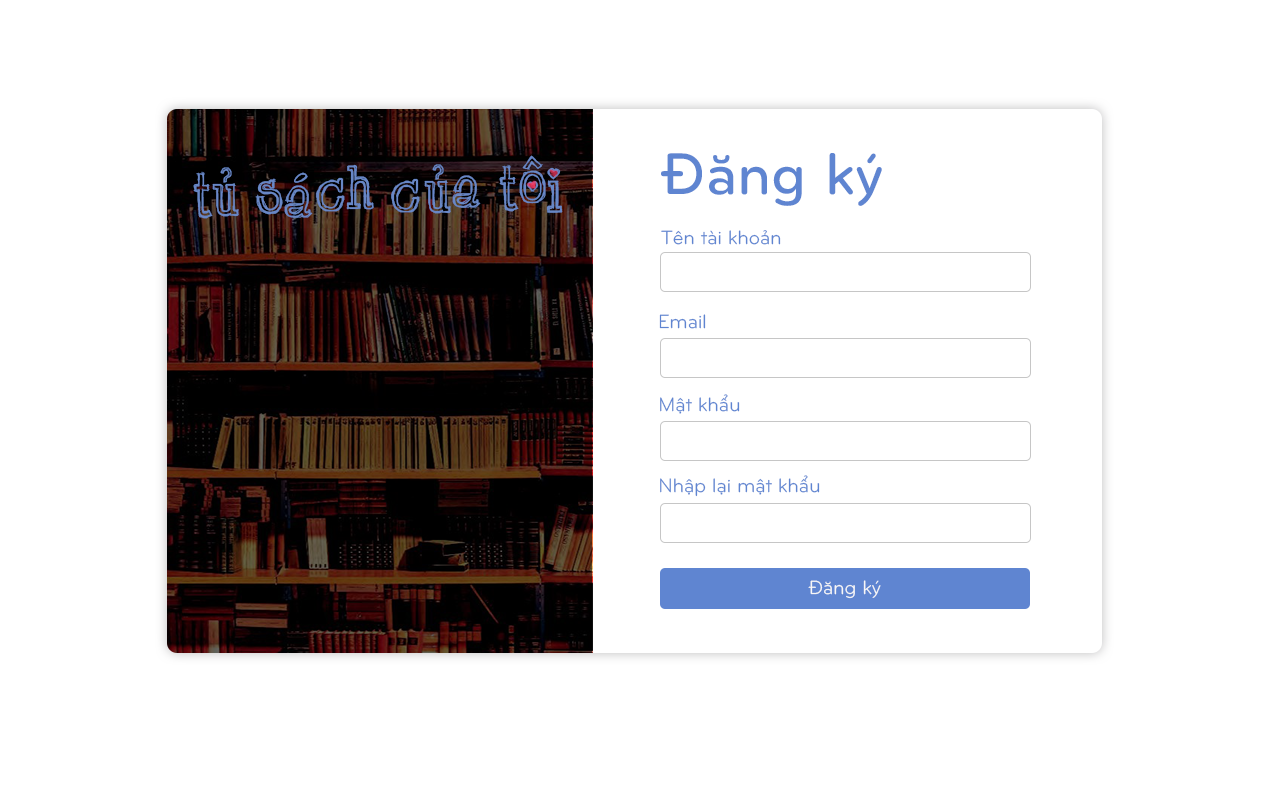
<style>
.page{position:relative;width:1280px;height:786px;background:#ffffff}
.page>*{position:absolute;margin:0}
.t1{font:54px "UTM-Chickenhawk";color:#6887c6}
.t2{font:61px "UTMBryantLGBold";color:#5f85d1}
.t3{font:20px "UTM-BryantLG";color:#5f85d1}
.t4{font:20px "UTM-BryantLG";color:#f7f7f7}
</style>
<div class="page">
<p class="t1" style="left:519px;top:155px;width:27px;height:49px">ô</p>
<p class="t2" style="left:661px;top:153px;width:221px;height:53px">Đăng ký</p>
<p class="t1" style="left:193px;top:171px;width:20px;height:48px">T</p>
<p class="t1" style="left:212px;top:167px;width:27px;height:50px">ủ</p>
<p class="t1" style="left:284px;top:172px;width:29px;height:46px">á</p>
<p class="t1" style="left:346px;top:164px;width:28px;height:46px">h</p>
<p class="t1" style="left:424px;top:164px;width:27px;height:50px">ủ</p>
<p class="t1" style="left:499px;top:164px;width:20px;height:48px">T</p>
<p class="t1" style="left:546px;top:167px;width:17px;height:46px">i</p>
<p class="t1" style="left:255px;top:178px;width:28px;height:37px">S</p>
<p class="t1" style="left:316px;top:177px;width:29px;height:35px">c</p>
<p class="t1" style="left:391px;top:178px;width:29px;height:35px">C</p>
<p class="t1" style="left:452px;top:175px;width:29px;height:33px">a</p>
<p class="t3" style="left:661px;top:230px;width:120px;height:15px">Tên tài khoản</p>
<p class="t3" style="left:659px;top:314px;width:47px;height:15px">Email</p>
<p class="t3" style="left:660px;top:394px;width:80px;height:20px">Mật khẩu</p>
<p class="t3" style="left:660px;top:475px;width:160px;height:22px">Nhập lại mật khẩu</p>
<p class="t4" style="left:808px;top:580px;width:73px;height:19px">Đăng ký</p>
</div>
